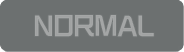
<style>
.page{position:relative;width:184px;height:52px;background:#6c7070}
.page>*{position:absolute;margin:0}
.t1{font:24px "KafuTechnoStd-HV";color:#a0a2a2;scale:0.92 1}
</style>
<div class="page">
<p class="t1" style="left:35px;top:15px;width:119px;height:22px">NORMAL</p>
</div>
